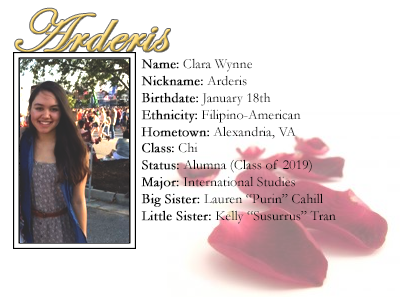
<style>
.page{position:relative;width:400px;height:300px;background:#ffffff}
.page>*{position:absolute;margin:0}
.t1{font:60px "EdwardianScriptITC";font-weight:bold}
.t2{font:14px "Garamond";color:#000000}
.t3{font:14px "Garamond";color:#000000;font-weight:bold}
</style>
<div class="page">
<p class="t1" style="left:15px;top:8px;width:155px;height:44px">Arderis</p>
<p class="t2" style="left:141px;top:58px;width:195px;height:166px"><span class="t3">Name:</span> Clara Wynne<br><span class="t3">Nickname:</span> Arderis<br><span class="t3">Birthdate:</span> January 18th<br><span class="t3">Ethnicity:</span> Filipino-American<br><span class="t3">Hometown:</span> Alexandria, VA<br><span class="t3">Class:</span> Chi<br><span class="t3">Status:</span> Alumna (Class of 2019)<br><span class="t3">Major:</span> International Studies<br><span class="t3">Big Sister: </span>Lauren “Purin” Cahill<br><span class="t3">Little Sister:</span> Kelly “Susurrus” Tran</p>
</div>
